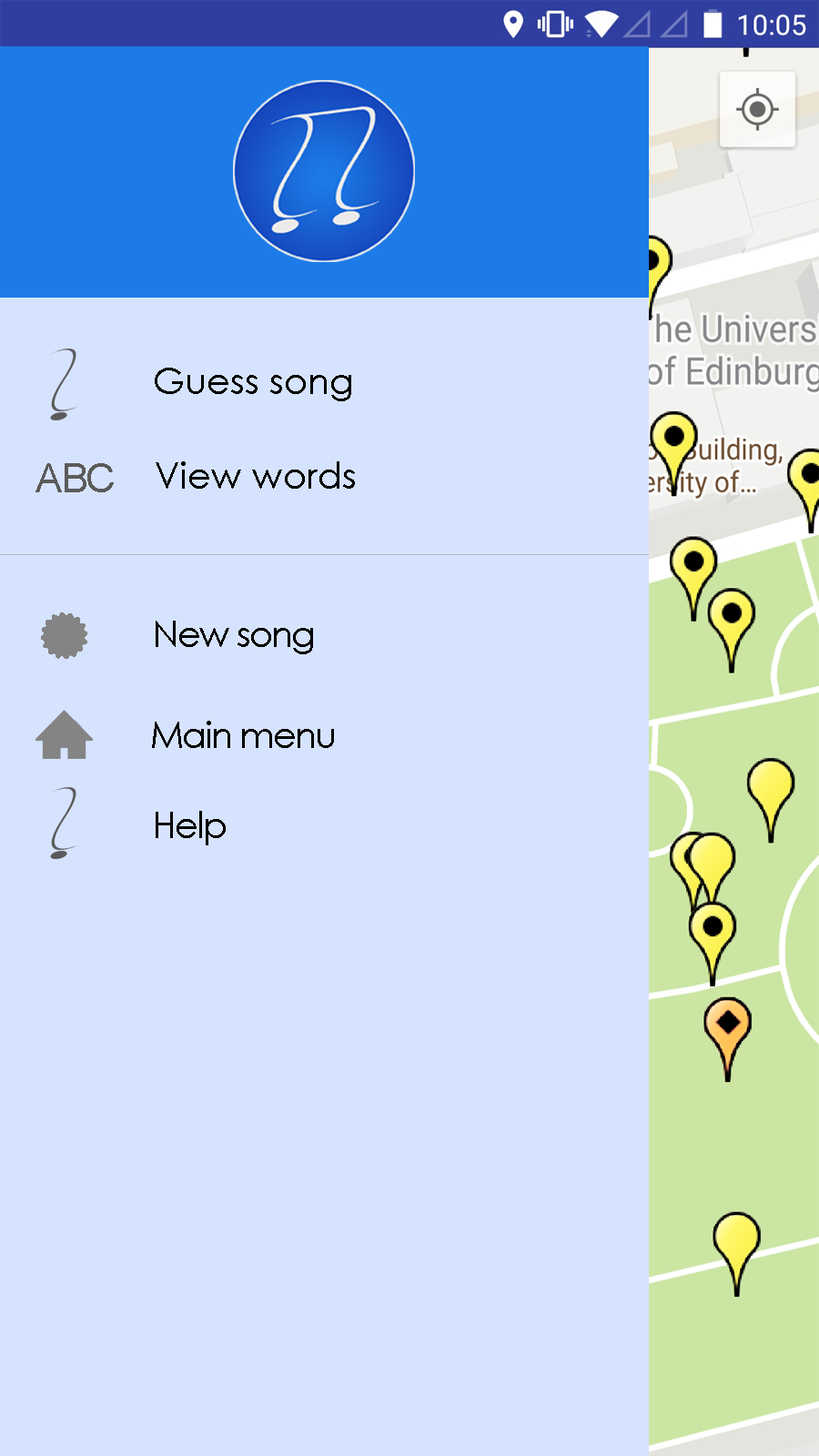
<style>
.page{position:relative;width:819px;height:1456px;background:#d6e3ff}
.page>*{position:absolute;margin:0}
.t1{font:36.4px "CenturyGothic";color:#000000}
.t2{font:40.9px "ArialMT";letter-spacing:-0.05em;color:#5b5b5b}
.t3{font:36.4px "CenturyGothic";letter-spacing:-0.05em;color:#000000}
</style>
<div class="page">
<p class="t1" style="left:155px;top:368px;width:196px;height:33px">Guess song</p>
<p class="t1" style="left:156px;top:461px;width:199px;height:28px">View words</p>
<p class="t2" style="left:35px;top:463px;width:79px;height:29px">ABC</p>
<p class="t3" style="left:156px;top:621px;width:157px;height:33px">New song</p>
<p class="t3" style="left:152px;top:721px;width:182px;height:27px">Main menu</p>
<p class="t3" style="left:156px;top:811px;width:70px;height:34px">Help</p>
</div>
